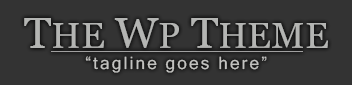
<style>
.page{position:relative;width:352px;height:85px;background:#333333}
.page>*{position:absolute;margin:0}
.t1{font:36.2px "Georgia";color:#b4b5b3}
.t2{font:43.4px "Georgia";color:#b4b5b3}
.t3{font:17.2px "MicrosoftSansSerif";letter-spacing:0.12em;color:#c2c2c0}
</style>
<div class="page">
<p class="t1" style="left:24px;top:18px;width:304px;height:30px"><span class="t2">T</span>HE<span class="t2"> W</span>P<span class="t2"> T</span>HEME</p>
<p class="t3" style="left:85px;top:56px;width:182px;height:17px">“tagline goes here”</p>
</div>
